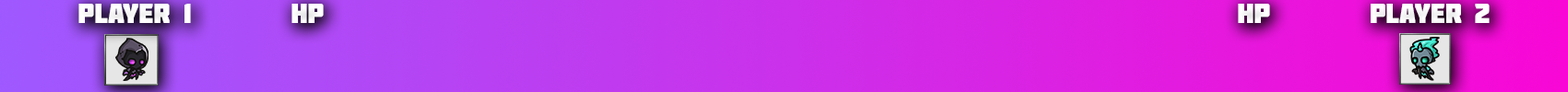
<style>
.page{position:relative;width:1568px;height:92px}
.page>*{position:absolute;margin:0}
.t1{font:27.7px "Molot";color:#ffffff}
.t2{font:27.7px "Molot";color:#fefefe}
</style>
<div class="page">
<p class="t1" style="left:78px;top:4px;width:113px;height:19px">player 1</p>
<p class="t1" style="left:291px;top:4px;width:33px;height:19px">hp</p>
<p class="t1" style="left:1238px;top:4px;width:32px;height:19px">hp</p>
<p class="t2" style="left:1371px;top:4px;width:119px;height:19px">player 2</p>
</div>
